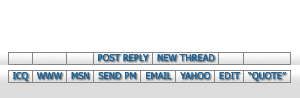
<style>
.page{position:relative;width:300px;height:98px;background:#ffffff}
.page>*{position:absolute;margin:0}
.t1{font:9.3px "Tahoma";color:#1c649c}
</style>
<div class="page">
<p class="t1" style="left:98px;top:54px;width:117px;height:7px">POST REPLY   NEW THREAD</p>
<p class="t1" style="left:13px;top:72px;width:273px;height:9px">ICQ   WWW   MSN   SEND PM   EMAIL   YAHOO   EDIT   “QUOTE”</p>
</div>
